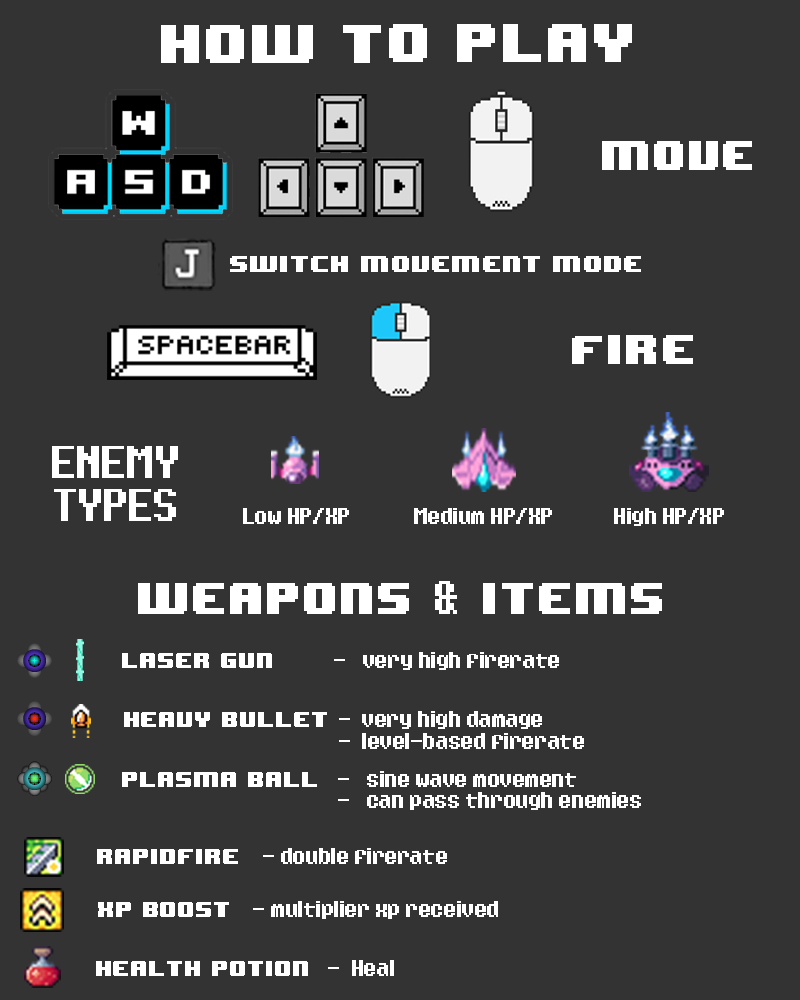
<style>
.page{position:relative;width:800px;height:1000px;background:#333333}
.page>*{position:absolute;margin:0}
.t1{font:45.7px "8BITWONDERNominal";color:#ffffff}
.t2{font:34.4px "8BITWONDERNominal";color:#ffffff}
.t3{font:19.3px "8BITWONDERNominal";color:#ffffff;scale:1.05 1}
.t4{font:34.4px "8BITWONDERNominal";color:#ffffff;scale:1.06 1}
.t5{font:36px "Eight-Bit-Dragon";color:#ffffff}
.t6{font:18px "Eight-Bit-Dragon";color:#ffffff}
.t7{font:37px "Eight-Bit-Dragon";color:#ffffff}
.t8{font:37px "8BITWONDERNominal";color:#ffffff}
.t9{font:18px "8BITWONDERNominal";color:#ffffff}
</style>
<div class="page">
<p class="t1" style="left:161px;top:24px;width:471px;height:39px">How to play</p>
<p class="t2" style="left:602px;top:141px;width:150px;height:29px">MOVE</p>
<p class="t3" style="left:230px;top:256px;width:411px;height:16px">switch movement mode</p>
<p class="t4" style="left:572px;top:335px;width:121px;height:29px">Fire</p>
<p class="t5" style="left:52px;top:446px;width:126px;height:75px;text-align:center">ENEMY<br>TYPES</p>
<p class="t6" style="left:243px;top:508px;width:106px;height:16px">Low HP/XP</p>
<p class="t6" style="left:414px;top:508px;width:138px;height:16px">Medium HP/XP</p>
<p class="t6" style="left:614px;top:508px;width:110px;height:18px">High HP/XP</p>
<p class="t7" style="left:435px;top:581px;width:22px;height:33px">&amp;</p>
<p class="t8" style="left:138px;top:583px;width:271px;height:31px">weapons</p>
<p class="t8" style="left:483px;top:583px;width:179px;height:31px">ITEMS</p>
<p class="t6" style="left:122px;top:652px;width:437px;height:18px"><span class="t9">laser gun              </span>-   very high firerate</p>
<p class="t6" style="left:124px;top:711px;width:460px;height:38px"><span class="t9">Heavy bullet </span>-  very high damage  <br>      -  level-based firerate</p>
<p class="t6" style="left:122px;top:771px;width:519px;height:39px"><span class="t9">plasma ball  </span>-   sine wave movement  <br>                                        -   can pass through enemies</p>
<p class="t9" style="left:97px;top:849px;width:141px;height:15px">rapidfire</p>
<p class="t6" style="left:263px;top:848px;width:184px;height:16px">- double firerate</p>
<p class="t9" style="left:98px;top:902px;width:131px;height:15px">XP Boost</p>
<p class="t6" style="left:253px;top:901px;width:245px;height:18px">- multiplier xp received</p>
<p class="t9" style="left:96px;top:961px;width:212px;height:15px">Health potion</p>
<p class="t6" style="left:328px;top:960px;width:66px;height:16px">-  Heal</p>
</div>
